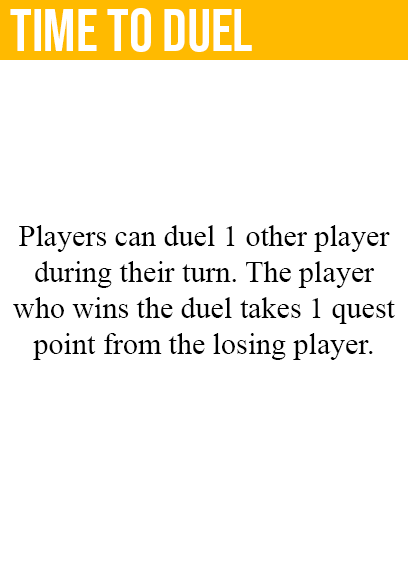
<style>
.page{position:relative;width:408px;height:585px;background:#ffffff}
.page>*{position:absolute;margin:0}
.t1{font:60px "BebasNeue-Regular";color:#ffffff}
.t2{font:30px "TimesNewRomanPSMT";color:#000000}
</style>
<div class="page">
<p class="t1" style="left:10px;top:8px;width:242px;height:44px">time to duel</p>
<p class="t2" style="left:13px;top:225px;width:382px;height:135px;text-align:center">Players can duel 1 other player<br>during their turn. The player<br>who wins the duel takes 1 quest<br>point from the losing player.</p>
</div>
